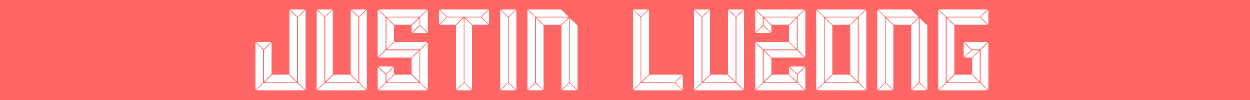
<style>
.page{position:relative;width:1250px;height:100px;background:#ff6666}
.page>*{position:absolute;margin:0}
.t1{font:110px "altsmaq6.8";letter-spacing:0.05em;color:#ffffff;scale:1.04 1}
</style>
<div class="page">
<p class="t1" style="left:255px;top:9px;width:734px;height:82px">JUSTIN LU2ONG</p>
</div>
